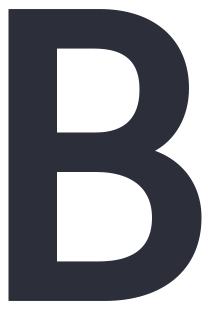
<style>
.page{position:relative;width:218px;height:312px;background:#2c2e39}
.page>*{position:absolute;margin:0}
.t1{font:417px "Akrobat-Bold";letter-spacing:0.02em;color:#2c2e39;scale:1.15 1}
</style>
<div class="page">
<p class="t1" style="left:8px;top:9px;width:194px;height:292px">B</p>
</div>
